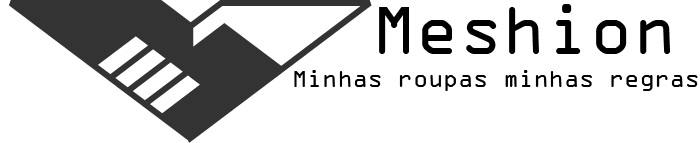
<style>
.page{position:relative;width:700px;height:143px;background:#ffffff}
.page>*{position:absolute;margin:0}
.t1{font:72px "OCRAExtended";color:#000000}
.t2{font:25px "OCRAExtended";color:#000000}
.t3{font:24px "OCRAExtended";color:#000000}
</style>
<div class="page">
<p class="t1" style="left:379px;top:4px;width:291px;height:50px">Meshion</p>
<p class="t2" style="left:294px;top:70px;width:404px;height:21px">Minhas roupas minhas regras <span class="t3">regras</span></p>
</div>
